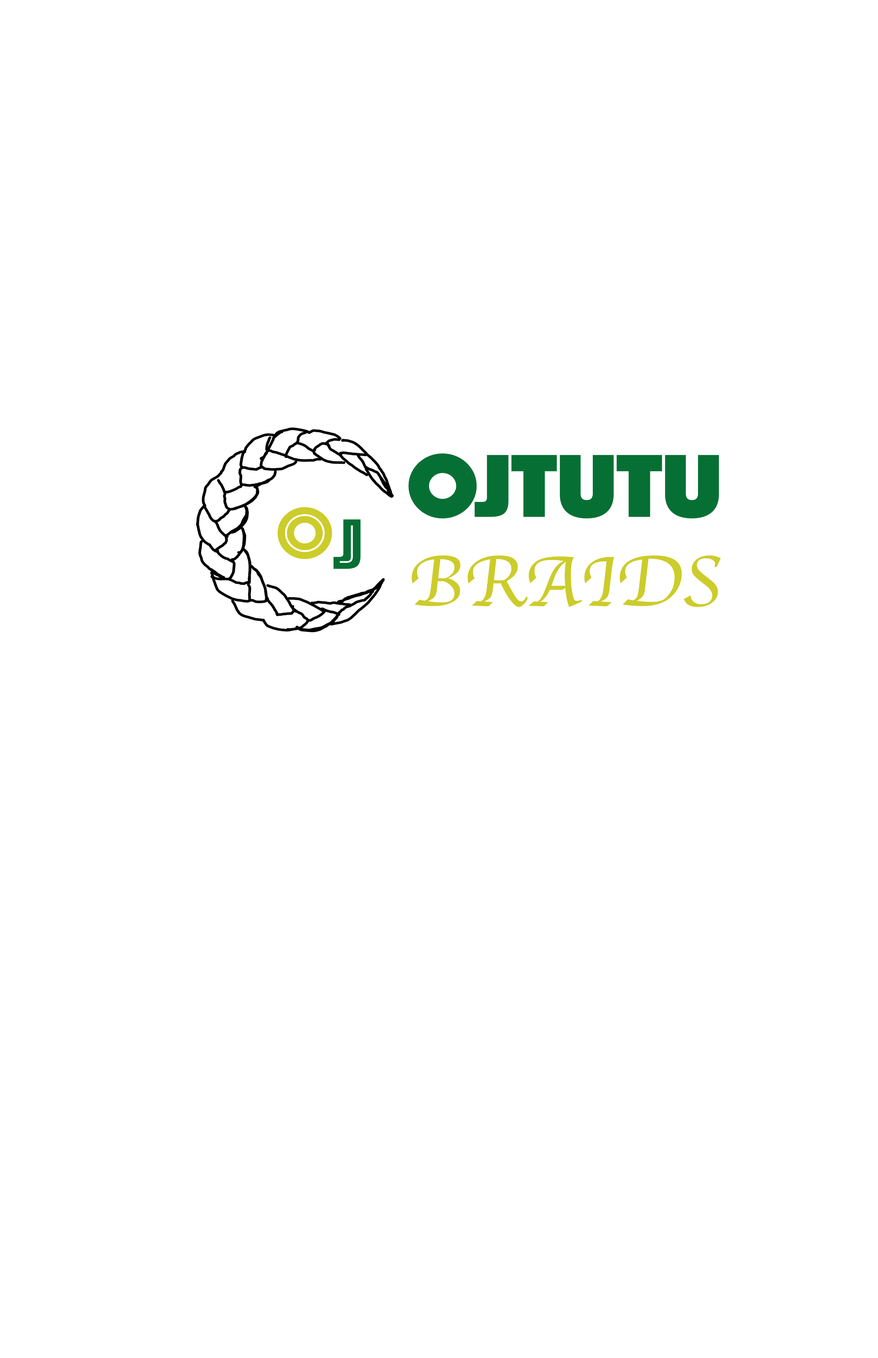
<style>
.page{position:relative;width:878px;height:1358px;background:#ffffff}
.page>*{position:absolute;margin:0}
.t1{font:92.6px "Phosphate-Solid";color:#067034;scale:1.05 1}
.t2{font:73.9px "Apple-Chancery";color:#cccc2b;scale:1.05 1}
.t3{font:73.9px "Phosphate-Inline";color:#cccc2b;scale:1.05 1}
.t4{font:73.9px "Phosphate-Inline";color:#067034;scale:1.05 1}
</style>
<div class="page">
<p class="t1" style="left:409px;top:453px;width:312px;height:154px;text-align:center">OJTUTU<br><span class="t2">BRAIDS</span></p>
<p class="t3" style="left:278px;top:507px;width:54px;height:52px">O</p>
<p class="t4" style="left:334px;top:519px;width:27px;height:50px">J</p>
</div>
